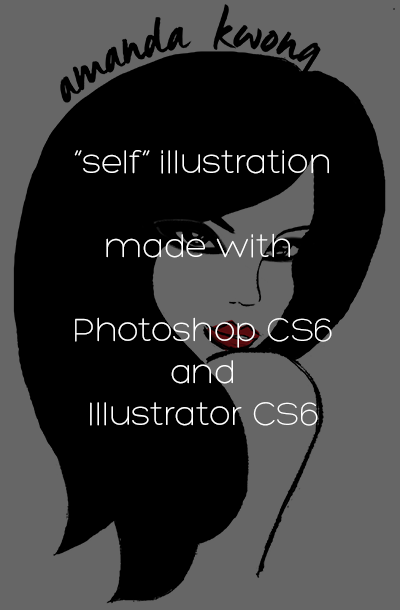
<style>
.page{position:relative;width:400px;height:610px;background:#666666}
.page>*{position:absolute;margin:0}
.t1{font:35px "Hero-Light";color:#ffffff}
</style>
<div class="page">
<p class="t1" style="left:74px;top:150px;width:258px;height:276px;text-align:center">“self” illustration<br><br>made with <br><br>Photoshop CS6<br>and<br>Illustrator CS6</p>
</div>
